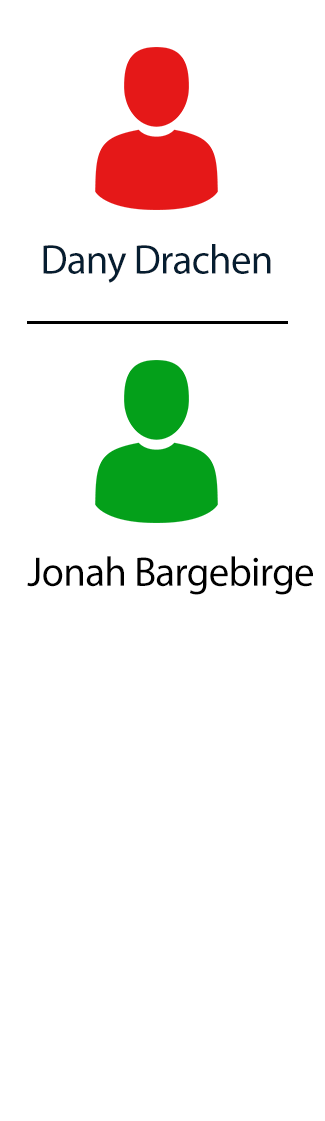
<style>
.page{position:relative;width:325px;height:1121px;background:#ffffff}
.page>*{position:absolute;margin:0}
.t1{font:41.4px "MyriadPro-Regular";letter-spacing:-0.02em;color:#061d30}
.t2{font:41.4px "MyriadPro-Regular";letter-spacing:-0.02em;color:#000000}
</style>
<div class="page">
<p class="t1" style="left:43px;top:244px;width:228px;height:39px">Dany Drachen</p>
<p class="t2" style="left:27px;top:556px;width:286px;height:39px">Jonah Bargebirge</p>
</div>
